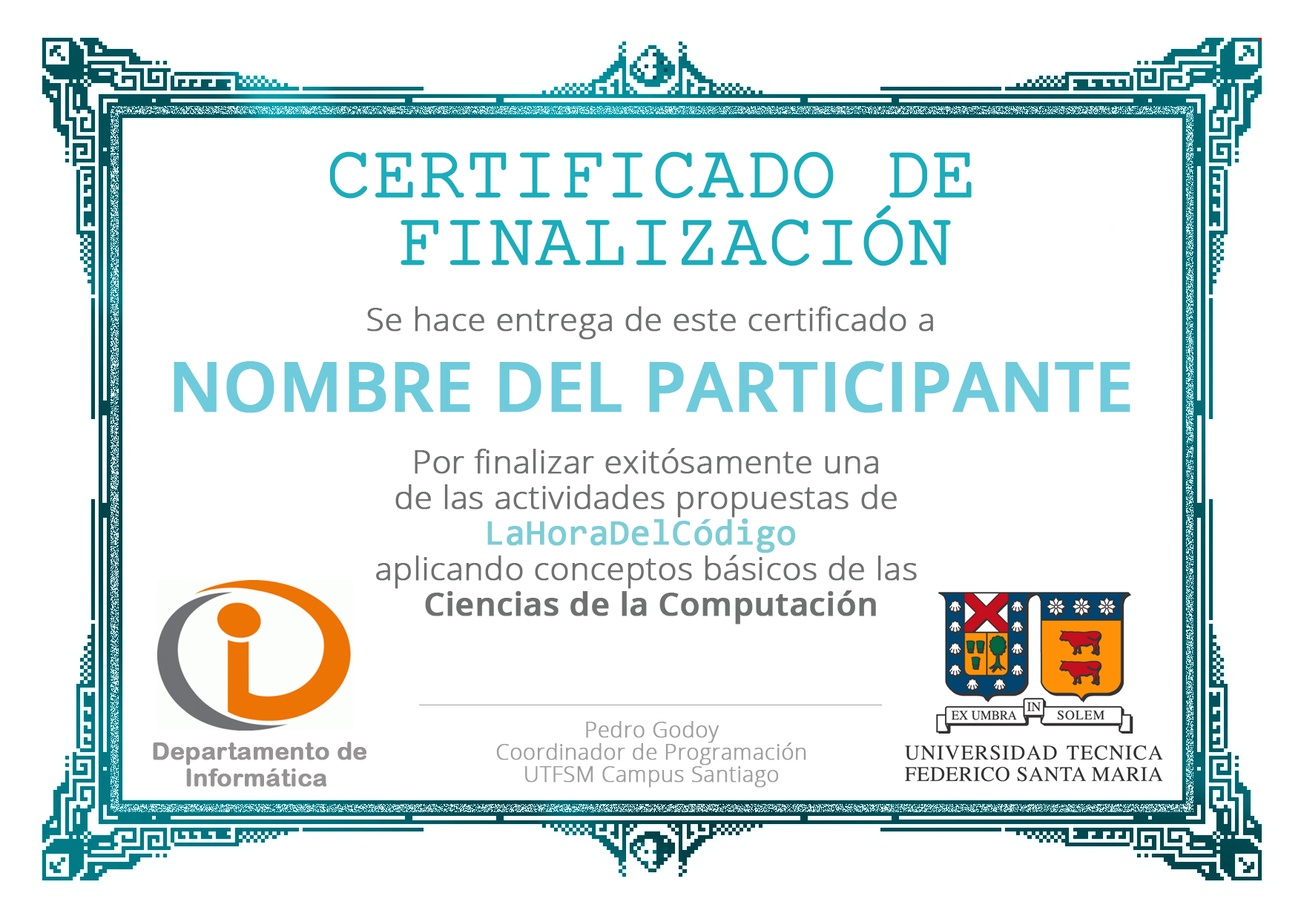
<style>
.page{position:relative;width:1301px;height:916px;background:#ffffff}
.page>*{position:absolute;margin:0}
.t1{font:74.2px/67.5px "CourierNewPSMT";color:#1aadbb;font-weight:bold}
.t2{font:32.6px/35.6px "OpenSans-Light";color:#6f7070;font-weight:bold}
.t3{font:32.6px/26.7px "OpenSans-Light";color:#6f7070;font-weight:bold}
.t4{font:67.9px/26.7px "OpenSans-Semibold";color:#6ecbdc;font-weight:bold}
.t5{font:36.2px/35.6px "Consolas";color:#7ccdd5;font-weight:bold}
.t6{font:32.6px/35.6px "OpenSans-Semibold";color:#6f7070;font-weight:bold}
.t7{font:21.7px/22.3px "OpenSans-Light";color:#9f9f9f;font-weight:bold}
.t8{font:24.4px/26.7px "ArialRoundedMTBold";color:#959393;font-weight:bold}
</style>
<div class="page">
<p class="t1" style="left:329px;top:151px;width:643px;height:115px;text-align:center">CERTIFICADO DE <br>FINALIZACIÓN</p>
<p class="t2" style="left:174px;top:306px;width:957px;height:319px;text-align:center"><span class="t3">Se hace entrega de este certificado a<br><br><br></span><span class="t4">NOMBRE DEL PARTICIPANTE<br><br></span>Por finalizar exitósamente una <br>de las actividades propuestas de <br><span class="t5">LaHoraDelCódigo <br></span>aplicando conceptos básicos de las <br><span class="t6">Ciencias de la Computación</span></p>
<p class="t7" style="left:496px;top:721px;width:310px;height:67px;text-align:center">Pedro Godoy<br>Coordinador de Programación<br>UTFSM Campus Santiago</p>
<p class="t8" style="left:153px;top:742px;width:214px;height:45px;text-align:center">Departamento de<br>Informática</p>
</div>
